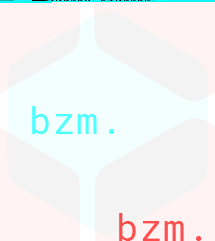
<style>
.page{position:relative;width:215px;height:241px;background:#f3f3f3}
.page>*{position:absolute;margin:0}
.t1{font:37px "RobotoMonoForPowerline-Regular";letter-spacing:0.04em}
</style>
<div class="page">
<p class="t1" style="left:32px;top:104px;width:83px;height:28px">bzm.</p>
</div>
